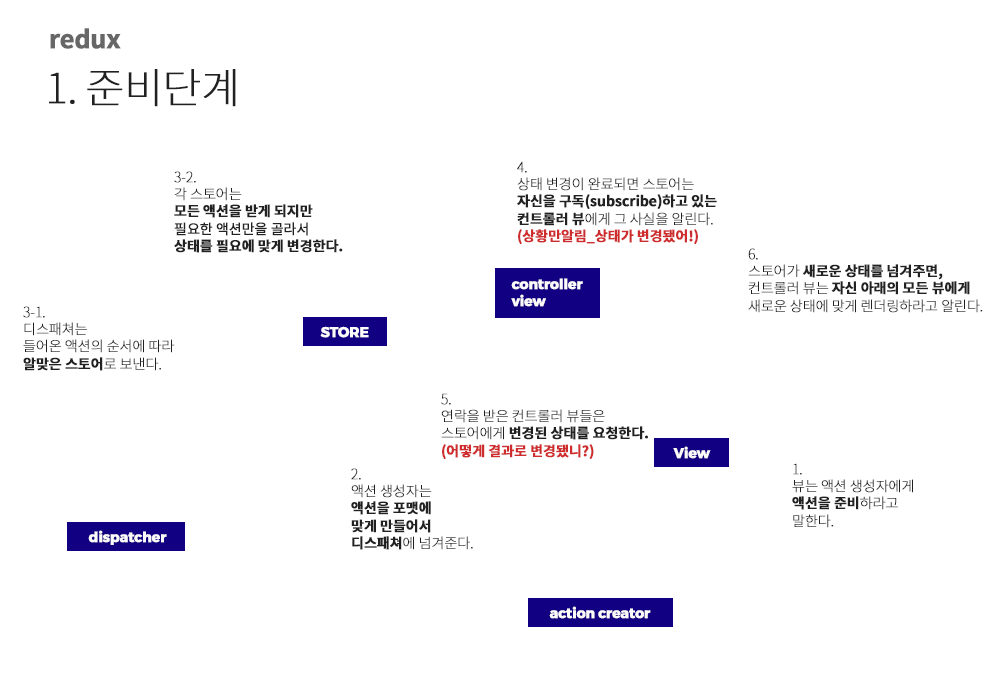
<style>
.page{position:relative;width:1000px;height:700px;background:#ffffff}
.page>*{position:absolute;margin:0}
.t1{font:25px "NotoSansCJKkr-Bold";letter-spacing:-0.025em;color:#676767;font-weight:bold}
.t2{font:41.7px "NotoSansCJKkr-Thin";letter-spacing:-0.025em;color:#212121;font-weight:bold}
.t3{font:14px/15px "NotoSansCJKkr-Bold";letter-spacing:-0.025em;color:#212121;font-weight:bold}
.t4{font:14px/15px "NotoSansCJKkr-Thin";letter-spacing:-0.025em;color:#212121;font-weight:bold}
.t5{font:14px/15px "NotoSansCJKkr-Bold";letter-spacing:-0.025em;color:#cf2d2d;font-weight:bold}
.t6{font:14px/15px "NotoSansCJKkr-Regular";letter-spacing:-0.025em;color:#212121;font-weight:bold}
.t7{font:14px/15px "Montserrat-Bold";letter-spacing:-0.025em;color:#fcfbfb;font-weight:bold}
.t8{font:14px "Montserrat-Bold";letter-spacing:-0.025em;color:#fcfbfb;font-weight:bold}
</style>
<div class="page">
<p class="t1" style="left:50px;top:28px;width:71px;height:21px">redux</p>
<p class="t2" style="left:49px;top:69px;width:187px;height:38px">1. 준비단계</p>
<p class="t3" style="left:517px;top:161px;width:200px;height:83px"><span class="t4">4. <br>상태 변경이 완료되면 스토어는 <br></span>자신을 구독(subscribe)하고 있는 <br>컨트롤러 뷰<span class="t4">에게 그 사실을 알린다.<br></span><span class="t5">(상황만알림_상태가 변경됐어!)</span></p>
<p class="t3" style="left:174px;top:171px;width:169px;height:82px"><span class="t4">3-2. <br>각 스토어는 <br></span>모든 액션을 받게 되지만 <br><span class="t6">필요한 액션만을 골라서 <br></span>상태를 필요에 맞게 변경한다.</p>
<p class="t4" style="left:748px;top:248px;width:235px;height:65px">6. <br>스토어가 <span class="t3">새로운 상태를 넘겨주면, <br></span>컨트롤러 뷰는 <span class="t3">자신 아래의 모든 뷰에게</span> <br>새로운 상태에 맞게 렌더링하라고 알린다.</p>
<p class="t7" style="left:511px;top:278px;width:72px;height:29px">controller <br>view</p>
<p class="t4" style="left:23px;top:306px;width:152px;height:65px">3-1. <br>디스패쳐는 <br>들어온 액션의 순서에 따라 <br><span class="t3">알맞은 스토어</span>로 보낸다.</p>
<p class="t8" style="left:320px;top:326px;width:49px;height:12px">STORE</p>
<p class="t4" style="left:441px;top:393px;width:207px;height:66px">5. <br>연락을 받은 컨트롤러 뷰들은 <br>스토어에게 <span class="t3">변경된 상태를 요청한다.<br></span><span class="t5">(어떻게 결과로 변경됐니?)</span></p>
<p class="t8" style="left:673px;top:446px;width:38px;height:13px">View</p>
<p class="t3" style="left:351px;top:468px;width:122px;height:82px"><span class="t4">2. <br>액션 생성자는 <br></span>액션을 포맷에 <br>맞게 만들어서 <br>디스패쳐<span class="t4">에 넘겨준다.</span></p>
<p class="t4" style="left:792px;top:463px;width:121px;height:65px">1. <br>뷰는 액션 생성자에게 <br><span class="t3">액션을 준비</span>하라고<br>말한다.</p>
<p class="t8" style="left:88px;top:530px;width:79px;height:15px">dispatcher</p>
<p class="t8" style="left:549px;top:606px;width:102px;height:13px">action creator</p>
</div>
